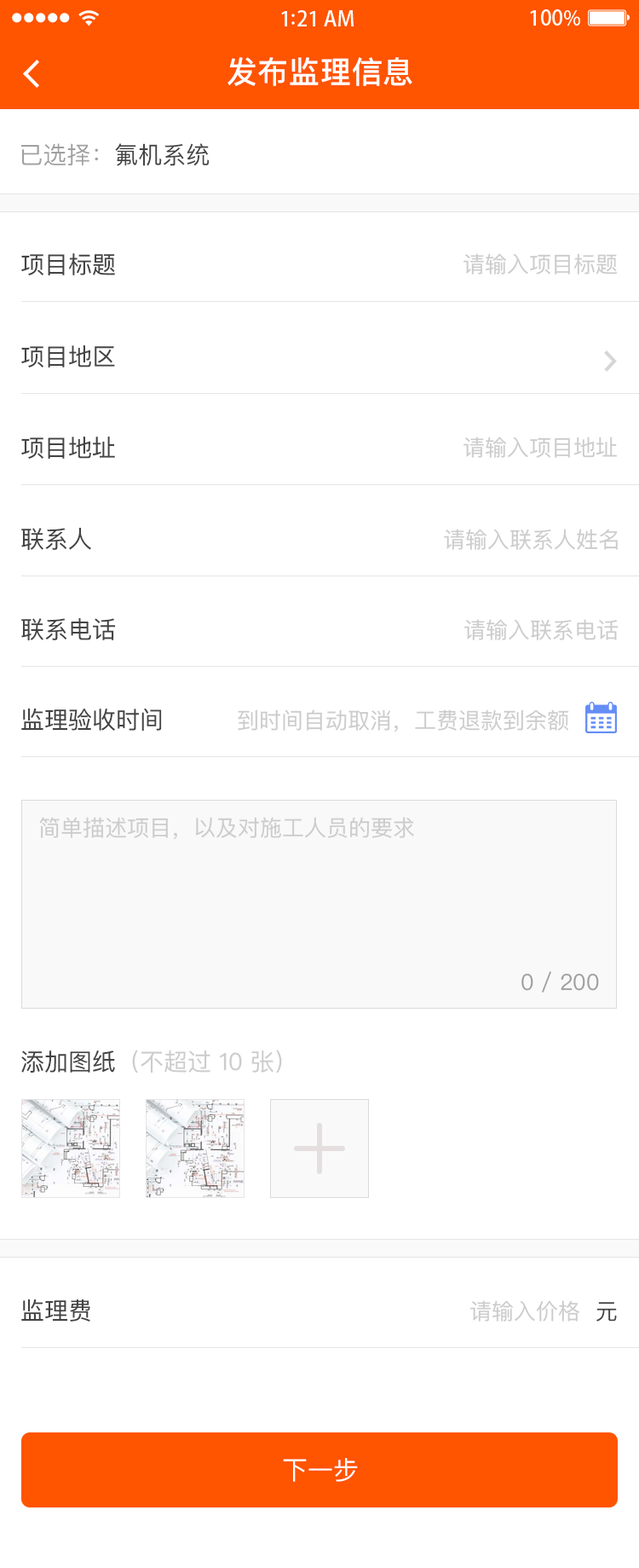
<style>
.page{position:relative;width:639px;height:1568px;background:#ffffff}
.page>*{position:absolute;margin:0}
.t1{font:30.7px "PingFangSC-Medium";letter-spacing:0.02em;color:#ffffff}
.t2{font:23.9px "PingFangSC-Regular";color:#a0a0a0;text-transform:uppercase}
.t3{font:23.9px "PingFangSC-Regular";color:#434343;text-transform:uppercase}
.t4{font:23.9px "PingFangSC-Regular";color:#434343}
.t5{font:22.2px "PingFangSC-Regular";color:#cccccc}
.t6{font:22.2px "PingFangSC-Regular";color:#a0a0a0}
.t7{font:23.9px "PingFangSC-Regular";color:#cccccc}
.t8{font:22.2px "PingFangSC-Regular";color:#434343}
.t9{font:25.6px "PingFangSC-Regular";color:#ffffff;text-transform:uppercase}
</style>
<div class="page">
<p class="t1" style="left:228px;top:57px;width:185px;height:29px">发布监理信息</p>
<p class="t2" style="left:21px;top:143px;width:188px;height:23px">已选择：<span class="t3">氟机系统</span></p>
<p class="t4" style="left:21px;top:253px;width:94px;height:22px">项目标题</p>
<p class="t5" style="left:464px;top:253px;width:153px;height:22px">请输入项目标题</p>
<p class="t4" style="left:21px;top:345px;width:94px;height:22px">项目地区</p>
<p class="t4" style="left:21px;top:437px;width:94px;height:22px">项目地址</p>
<p class="t5" style="left:464px;top:437px;width:153px;height:21px">请输入项目地址</p>
<p class="t4" style="left:21px;top:528px;width:70px;height:23px">联系人</p>
<p class="t5" style="left:444px;top:529px;width:174px;height:21px">请输入联系人姓名</p>
<p class="t4" style="left:21px;top:618px;width:95px;height:23px">联系电话</p>
<p class="t5" style="left:465px;top:619px;width:154px;height:21px">请输入联系电话</p>
<p class="t4" style="left:21px;top:708px;width:141px;height:23px">监理验收时间</p>
<p class="t5" style="left:238px;top:709px;width:332px;height:23px">到时间自动取消，工费退款到余额</p>
<p class="t5" style="left:39px;top:817px;width:375px;height:23px">简单描述项目，以及对施工人员的要求</p>
<p class="t6" style="left:522px;top:971px;width:77px;height:21px">0 / 200</p>
<p class="t7" style="left:21px;top:1050px;width:261px;height:23px"><span class="t4">添加图纸</span>（不超过 10 张）</p>
<p class="t4" style="left:21px;top:1299px;width:69px;height:23px">监理费</p>
<p class="t5" style="left:471px;top:1300px;width:109px;height:22px">请输入价格</p>
<p class="t8" style="left:597px;top:1302px;width:20px;height:20px">元</p>
<p class="t9" style="left:283px;top:1458px;width:75px;height:24px">下一步</p>
</div>
